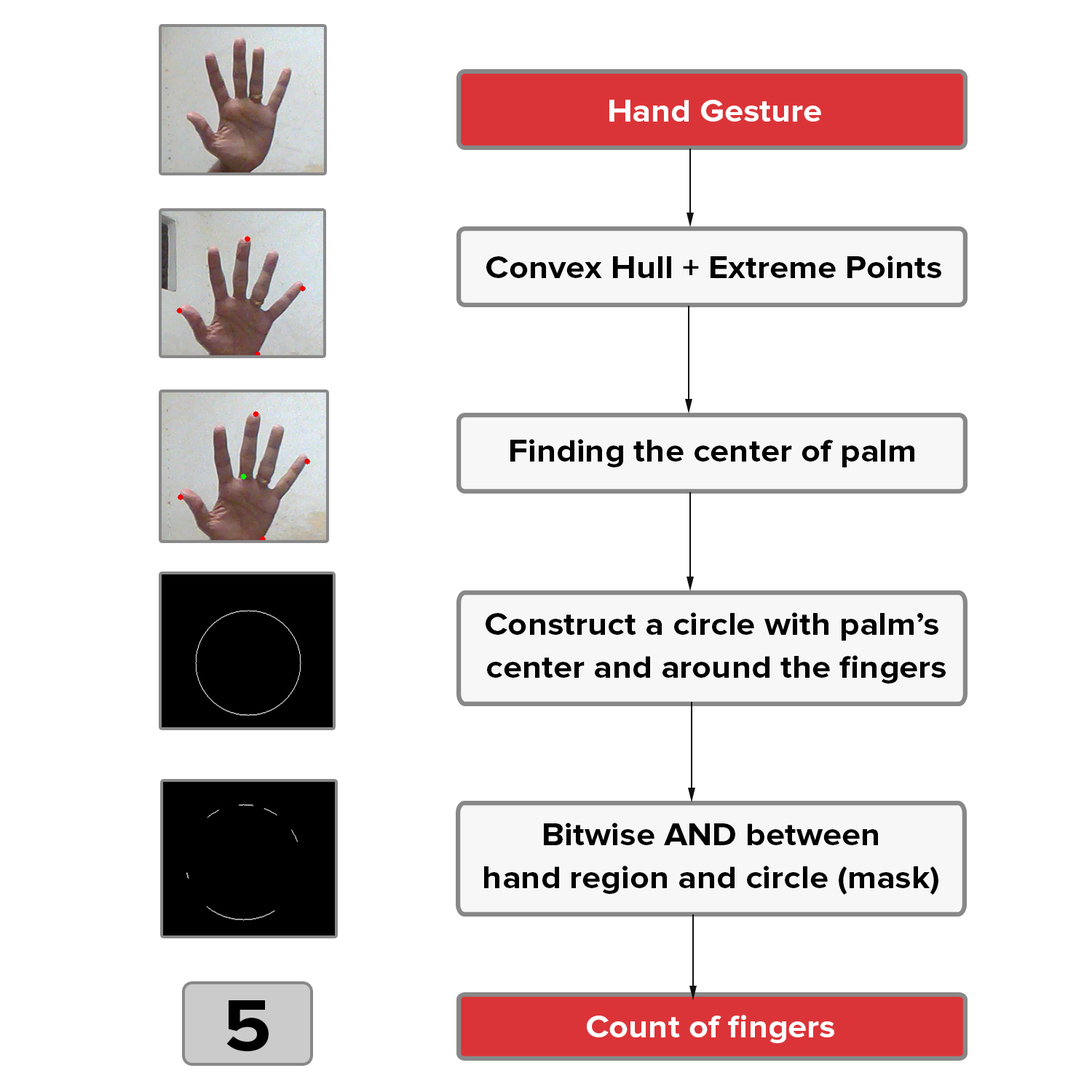
<style>
.page{position:relative;width:1092px;height:1092px;background:#ffffff}
.page>*{position:absolute;margin:0}
.t1{font:32.3px "ProximaNova-Bold";color:#ffffff;scale:1.06 1}
.t2{font:32.3px "ProximaNova-Bold";color:#000000;scale:1.06 1}
.t3{font:32.3px/43.2px "ProximaNova-Bold";color:#000000;scale:1.06 1}
.t4{font:75.8px "ProximaNova-Bold";color:#000000;scale:1.06 1}
</style>
<div class="page">
<p class="t1" style="left:609px;top:100px;width:212px;height:22px">Hand Gesture</p>
<p class="t2" style="left:486px;top:256px;width:455px;height:22px">Convex Hull + Extreme Points</p>
<p class="t2" style="left:510px;top:439px;width:404px;height:28px">Finding the center of palm</p>
<p class="t3" style="left:486px;top:612px;width:460px;height:72px;text-align:center">Construct a circle with palm’s <br>center and around the fingers</p>
<p class="t3" style="left:484px;top:823px;width:454px;height:72px;text-align:center">Bitwise AND between<br>hand region and circle (mask)</p>
<p class="t4" style="left:226px;top:1000px;width:43px;height:52px">5</p>
<p class="t1" style="left:587px;top:1015px;width:247px;height:28px">Count of fingers</p>
</div>
